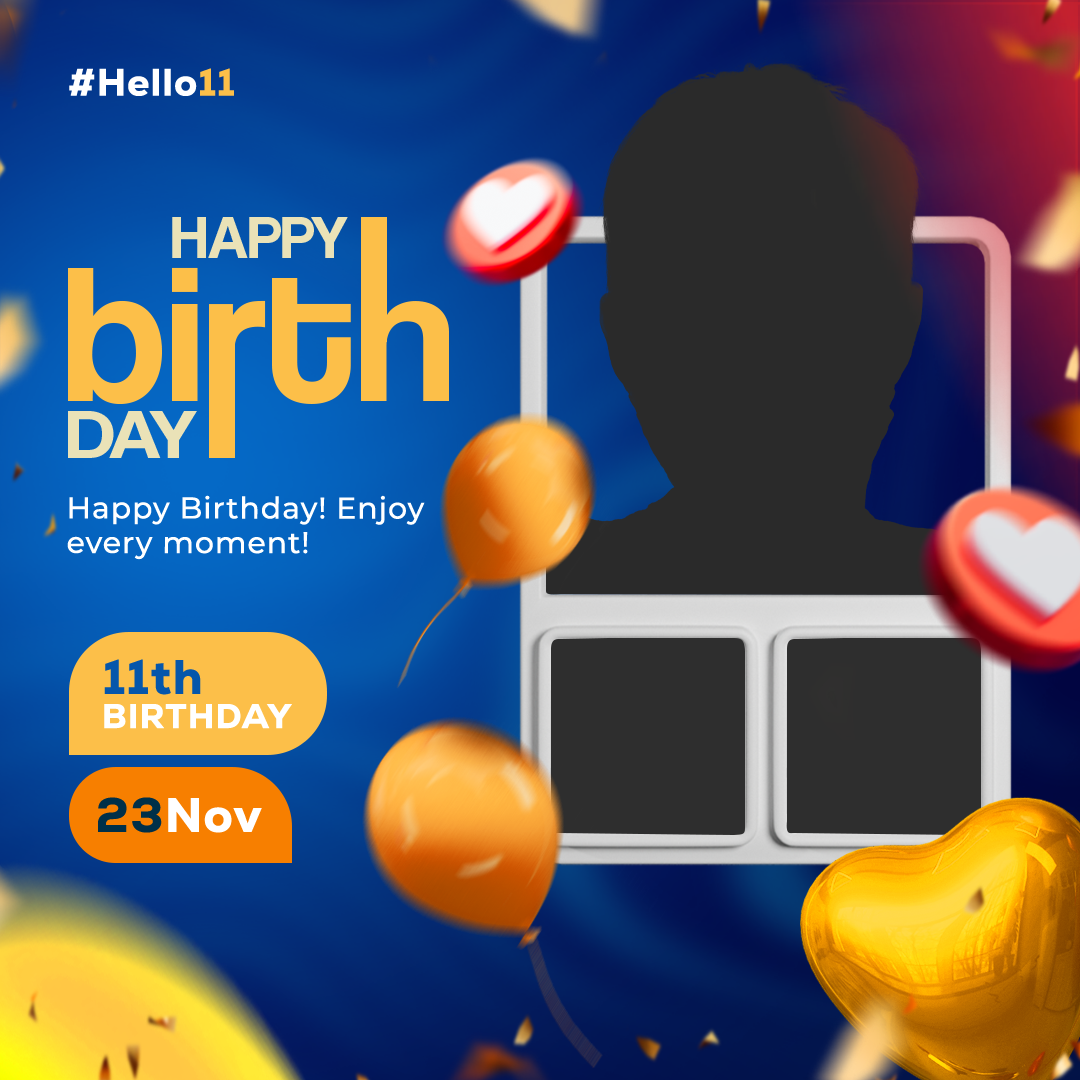
<style>
.page{position:relative;width:1080px;height:1080px}
.page>*{position:absolute;margin:0}
.t1{font:38px "Nexa-Heavy";letter-spacing:0.03em;color:#ffffff}
.t2{font:38px "Nexa-Heavy";letter-spacing:0.03em;color:#fcbf49}
.t3{font:62.5px "CoolveticaRg-Regular";color:#eae2b7}
.t4{font:197.4px "CoolveticaRg-Regular";color:#fcbf49}
.t5{font:71.5px "CoolveticaRg-Regular";color:#eae2b7;scale:1.13 1}
.t6{font:30px/34.7px "Montserrat-Medium";letter-spacing:0.03em;color:#ffffff}
.t7{font:48.3px "Nexa-Heavy";letter-spacing:0.03em;color:#0556ab}
.t8{font:34.2px "Nexa-Heavy";letter-spacing:0.03em;color:#ffffff}
.t9{font:48.3px "Nexa-Heavy";letter-spacing:0.03em;color:#ffffff}
.t10{font:48.3px "Nexa-Heavy";letter-spacing:0.03em;color:#003049}
</style>
<div class="page">
<p class="t1" style="left:69px;top:68px;width:165px;height:28px">#Hello<span class="t2">11</span></p>
<p class="t3" style="left:172px;top:217px;width:176px;height:41px">HAPPY</p>
<p class="t4" style="left:68px;top:267px;width:381px;height:137px">birth</p>
<p class="t5" style="left:68px;top:411px;width:129px;height:47px">DAY</p>
<p class="t6" style="left:67px;top:495px;width:358px;height:65px">Happy Birthday! Enjoy every moment!</p>
<p class="t7" style="left:104px;top:659px;width:97px;height:36px">11th</p>
<p class="t8" style="left:104px;top:704px;width:188px;height:25px">BIRTHDAY</p>
<p class="t9" style="left:98px;top:797px;width:164px;height:36px"><span class="t10">23</span>Nov</p>
</div>
